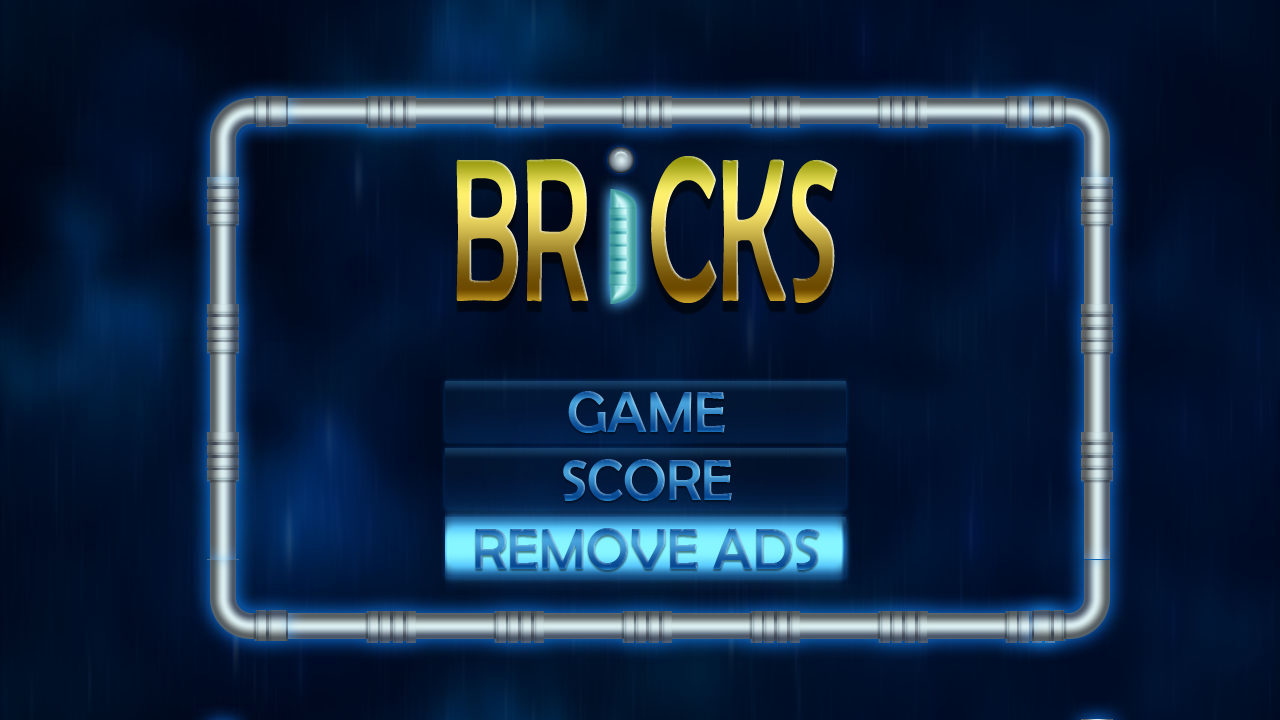
<style>
.page{position:relative;width:1280px;height:720px}
.page>*{position:absolute;margin:0}
.t1{font:205.9px "BerlinSansFB-Reg";scale:0.56 1}
.t2{font:58px "BerlinSansFB-Reg"}
</style>
<div class="page">
<p class="t1" style="left:456px;top:155px;width:382px;height:148px">BR  CKS</p>
<p class="t2" style="left:568px;top:391px;width:157px;height:42px">GAME</p>
<p class="t2" style="left:563px;top:459px;width:169px;height:42px">SCORE</p>
<p class="t2" style="left:475px;top:528px;width:345px;height:42px">REMOVE ADS</p>
</div>
